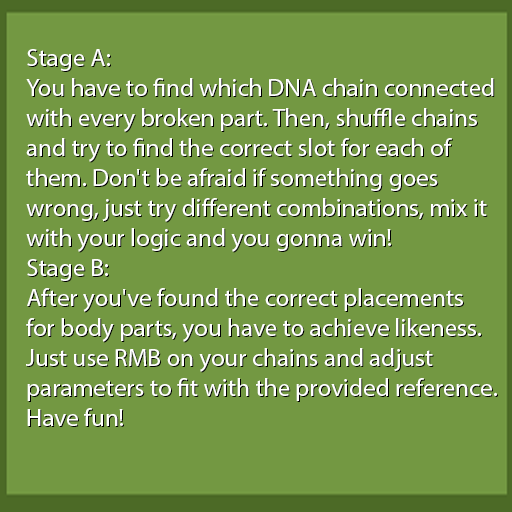
<style>
.page{position:relative;width:512px;height:512px;background:#739842}
.page>*{position:absolute;margin:0}
.t1{font:25px "MyriadPro-Regular";color:#ffffff}
.t2{font:25px "MyriadPro-Regular"}
</style>
<div class="page">
<p class="t1" style="left:26px;top:49px;width:471px;height:377px">Stage A:<br>You have to find which DNA chain connected<br>with every broken part. Then, shuffle chains <br>and try to find the correct slot for each of <br>them. Don't be afraid if something goes <br>wrong, just try different combinations, mix it <br>with your logic and you gonna win!<br>Stage B:<br>After you've found the correct placements <br>for body parts, you have to achieve likeness. <br>Just use RMB on your chains and adjust <br>parameters to fit with the provided reference. <br>Have fun!</p>
<p class="t2" style="left:27px;top:50px;width:471px;height:377px">Stage A:<br>You have to find which DNA chain connected<br>with every broken part. Then, shuffle chains <br>and try to find the correct slot for each of <br>them. Don't be afraid if something goes <br>wrong, just try different combinations, mix it <br>with your logic and you gonna win!<br>Stage B:<br>After you've found the correct placements <br>for body parts, you have to achieve likeness. <br>Just use RMB on your chains and adjust <br>parameters to fit with the provided reference. <br>Have fun!</p>
</div>
